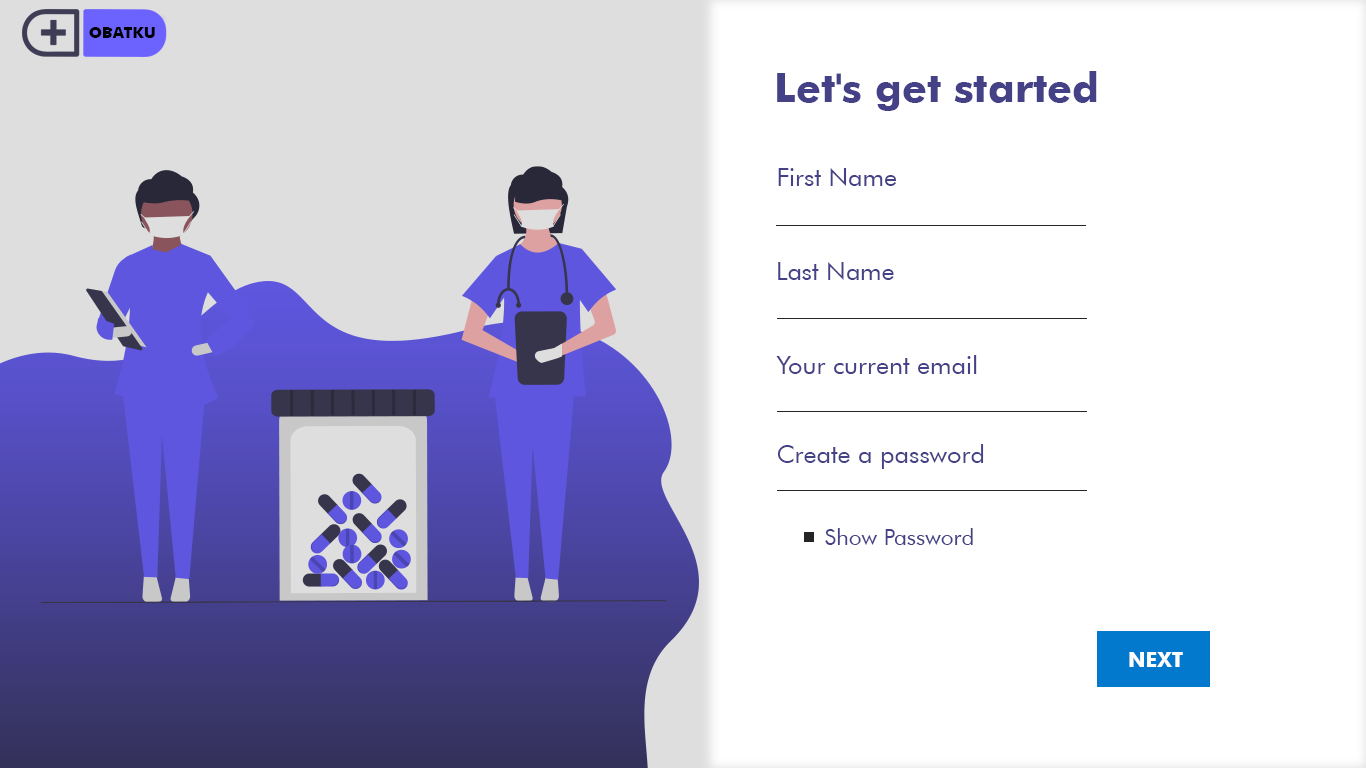
<style>
.page{position:relative;width:1366px;height:768px;background:#ffffff}
.page>*{position:absolute;margin:0}
.t1{font:15.6px "Futura-Bold";color:#000000}
.t2{font:40.7px "Futura-Bold";color:#454187}
.t3{font:25.3px "FuturaBT-Book";color:#454187}
.t4{font:22.5px "FuturaBT-Book";color:#454187}
.t5{font:20.6px "Futura-Bold";color:#ffffff}
</style>
<div class="page">
<p class="t1" style="left:89px;top:27px;width:66px;height:11px">OBATKU</p>
<p class="t2" style="left:777px;top:71px;width:320px;height:40px">Let's get started</p>
<p class="t3" style="left:778px;top:168px;width:119px;height:18px">First Name</p>
<p class="t3" style="left:778px;top:262px;width:116px;height:18px">Last Name</p>
<p class="t3" style="left:776px;top:355px;width:201px;height:19px">Your current email</p>
<p class="t3" style="left:777px;top:444px;width:207px;height:25px">Create a password</p>
<p class="t4" style="left:825px;top:528px;width:148px;height:17px">Show Password</p>
<p class="t5" style="left:1129px;top:652px;width:54px;height:15px">NEXT</p>
</div>
